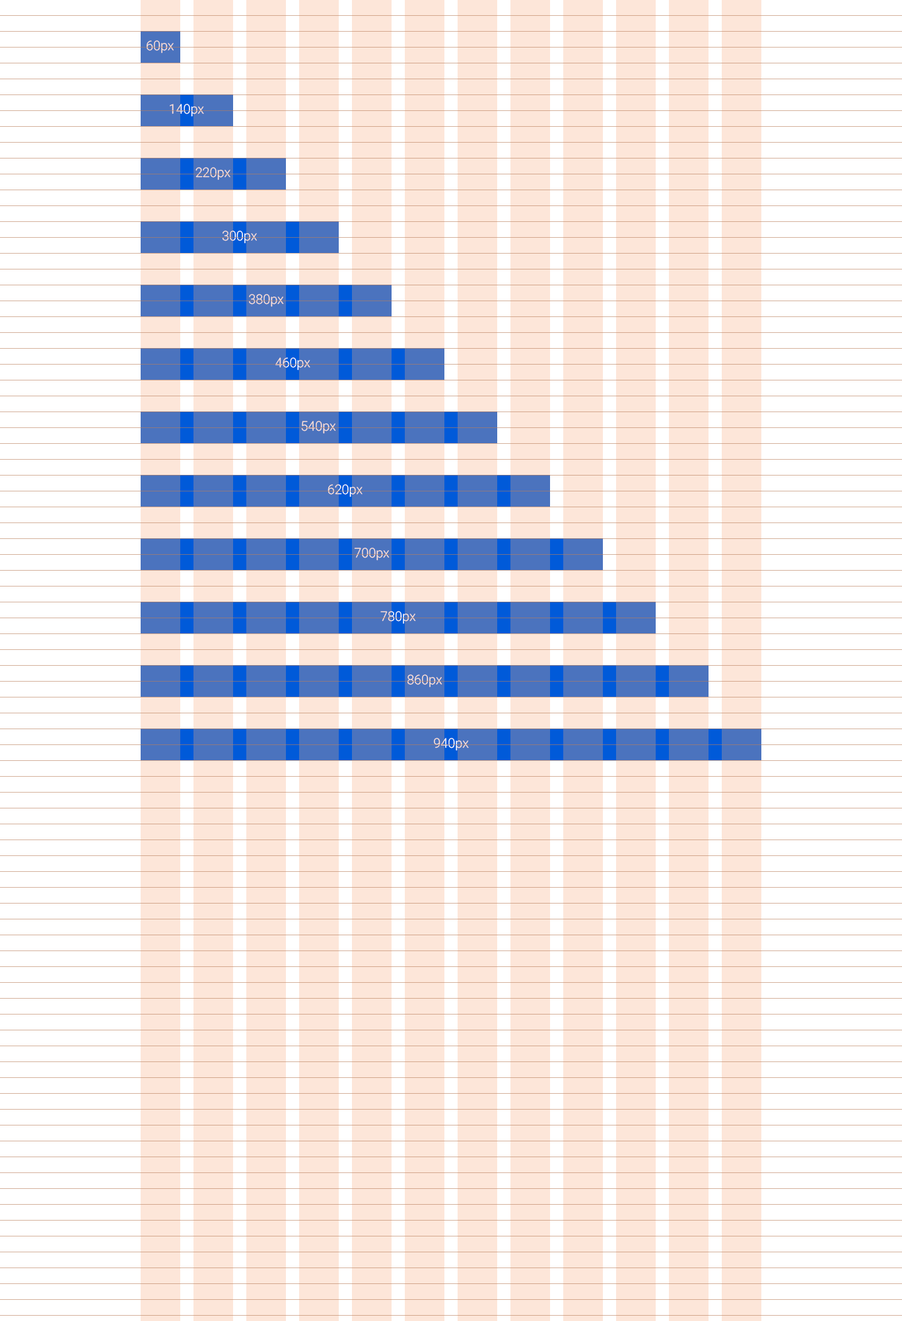
<style>
.page{position:relative;width:902px;height:1321px;background:#ffffff}
.page>*{position:absolute;margin:0}
.t1{font:13.2px "Roboto-Light";letter-spacing:-0.005em;color:#fde6d9}
.t2{font:13.2px "Roboto-Light";letter-spacing:-0.005em}
.t3{font:13.2px "Roboto-Light";letter-spacing:-0.005em;color:#ffffff}
</style>
<div class="page">
<p class="t1" style="left:147px;top:40px;width:27px;height:14px">60px</p>
<p class="t2" style="left:170px;top:104px;width:34px;height:13px">140px</p>
<p class="t1" style="left:196px;top:167px;width:35px;height:13px">220px</p>
<p class="t3" style="left:222px;top:231px;width:35px;height:13px">300px</p>
<p class="t1" style="left:249px;top:294px;width:35px;height:13px">380px</p>
<p class="t2" style="left:275px;top:357px;width:36px;height:14px">460px</p>
<p class="t1" style="left:301px;top:421px;width:35px;height:13px">540px</p>
<p class="t2" style="left:328px;top:484px;width:35px;height:13px">620px</p>
<p class="t1" style="left:354px;top:548px;width:36px;height:13px">700px</p>
<p class="t2" style="left:381px;top:611px;width:35px;height:13px">780px</p>
<p class="t1" style="left:408px;top:675px;width:35px;height:13px">860px</p>
<p class="t2" style="left:434px;top:738px;width:35px;height:13px">940px</p>
</div>
